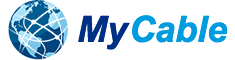
<style>
.page{position:relative;width:235px;height:60px;background:#ffffff}
.page>*{position:absolute;margin:0}
.t1{font:36px "Arial-BoldItalicMT";color:#002f86}
.t2{font:36px "Arial-BoldItalicMT";color:#009cde}
</style>
<div class="page">
<p class="t1" style="left:78px;top:15px;width:52px;height:35px">My</p>
<p class="t2" style="left:132px;top:15px;width:96px;height:28px">Cable</p>
</div>
